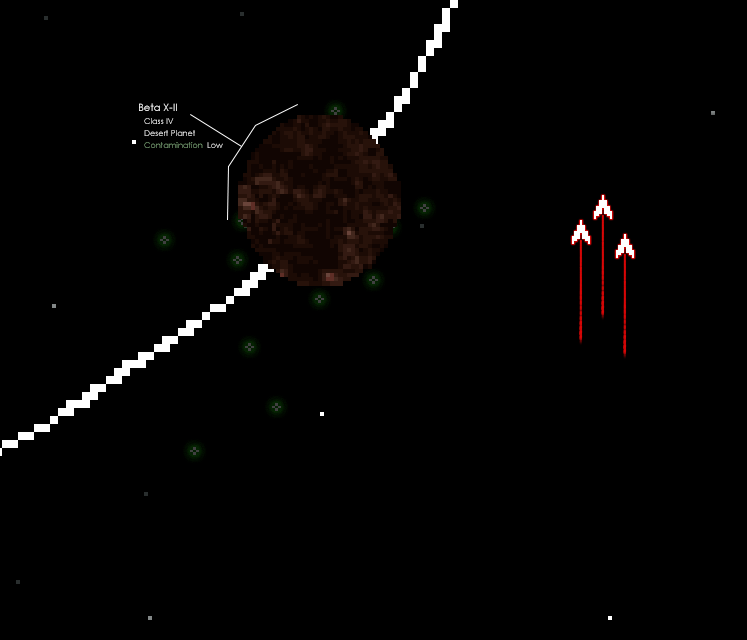
<style>
.page{position:relative;width:747px;height:640px;background:#000000}
.page>*{position:absolute;margin:0}
.t1{font:10px "CenturyGothic";color:#ffffff}
.t2{font:8px "CenturyGothic"}
</style>
<div class="page">
<p class="t1" style="left:139px;top:103px;width:38px;height:8px">Beta X-II</p>
<p class="t2" style="left:144px;top:118px;width:30px;height:6px">Class IV</p>
<p class="t2" style="left:144px;top:130px;width:51px;height:6px">Desert Planet</p>
<p class="t2" style="left:144px;top:142px;width:79px;height:6px">Contamination  Low</p>
</div>
